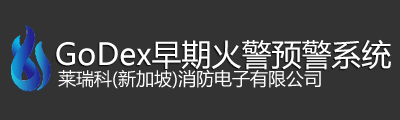
<style>
.page{position:relative;width:400px;height:120px;background:#333333}
.page>*{position:absolute;margin:0}
.t1{font:30px "MicrosoftYaHei";color:#ffffff}
.t2{font:18px "MicrosoftYaHei";color:#fefdfd}
</style>
<div class="page">
<p class="t1" style="left:56px;top:39px;width:335px;height:31px">GoDex早期火警预警系统</p>
<p class="t2" style="left:58px;top:69px;width:263px;height:20px">莱瑞科(新加坡)消防电子有限公司</p>
</div>
